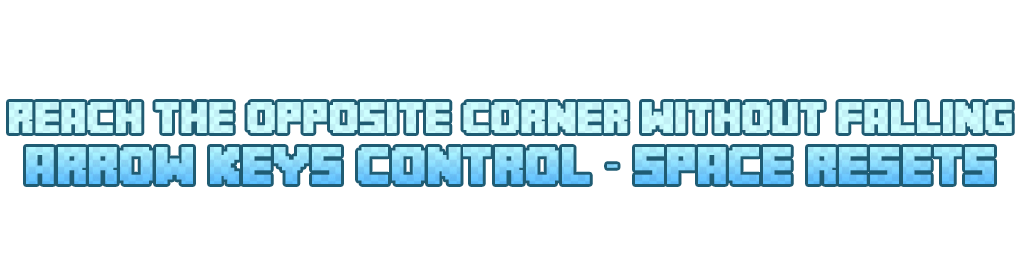
<style>
.page{position:relative;width:1024px;height:256px;background:#ffffff}
.page>*{position:absolute;margin:0}
.t1{font:31px/38px "MineCrafter-3"}
.t2{font:37px/51px "MineCrafter-3"}
</style>
<div class="page">
<p class="t1" style="left:9px;top:102px;width:1003px;height:82px;text-align:center">Reach the opposite corner without falling<br><span class="t2">arrow keys control - space resets</span></p>
</div>
